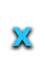
<style>
.page{position:relative;width:45px;height:75px;background:#ffffff}
.page>*{position:absolute;margin:0}
.t1{font:34.7px "Sarala-Bold";letter-spacing:0.005em;color:#21c6fc}
</style>
<div class="page">
<p class="t1" style="left:12px;top:27px;width:20px;height:19px">x</p>
</div>
